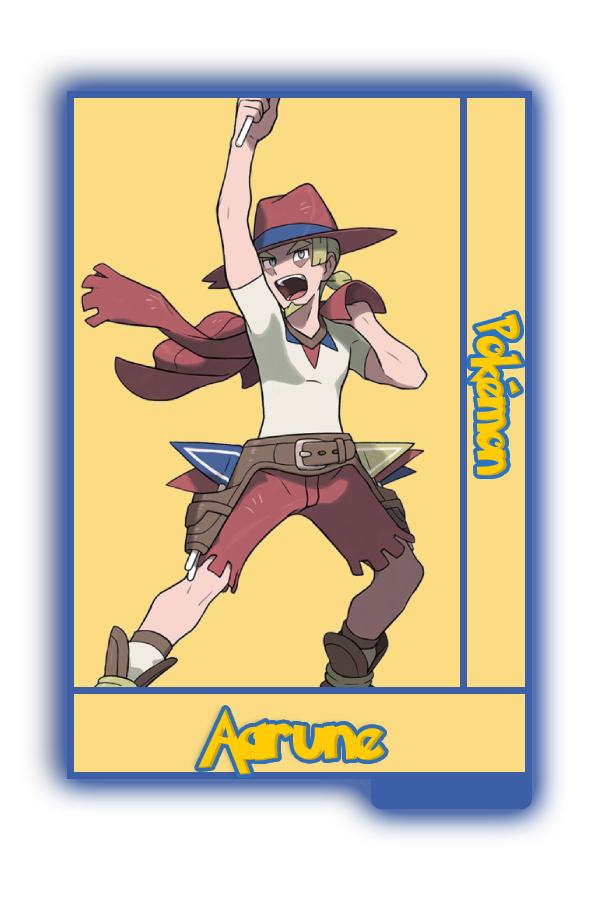
<style>
.page{position:relative;width:600px;height:900px;background:#fbdc83}
.page>*{position:absolute;margin:0}
.t1{font:48.8px "PokemonSolidNormal";color:#ffcb05;scale:0.8 1}
.t2{font:56.6px "PokemonSolidNormal";color:#ffcb05;scale:0.92 1}
</style>
<div class="page">
<p class="t1" style="left:469px;top:313px;width:54px;height:163px;rotate:90deg">Pokémon</p>
<p class="t2" style="left:198px;top:708px;width:187px;height:67px">Aarune</p>
</div>
